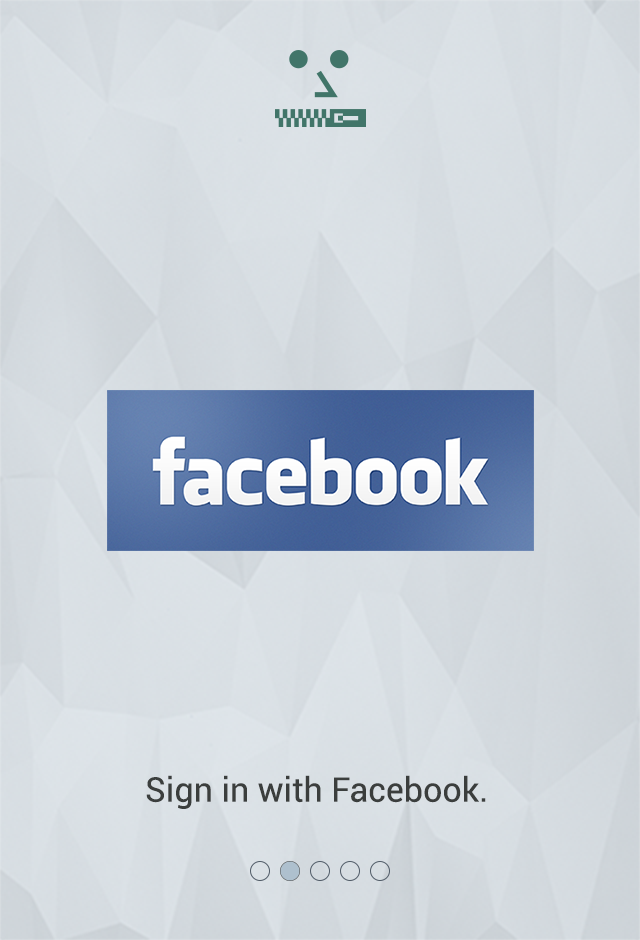
<style>
.page{position:relative;width:640px;height:940px}
.page>*{position:absolute;margin:0}
.t1{font:34px "Roboto-Regular";color:#3b3e3d}
</style>
<div class="page">
<p class="t1" style="left:146px;top:775px;width:340px;height:34px">Sign in with Facebook.</p>
</div>
